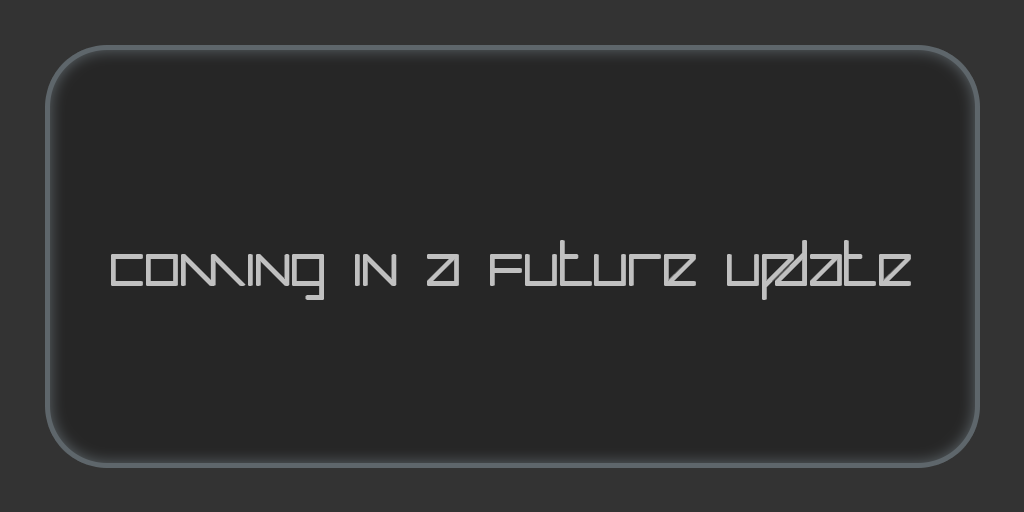
<style>
.page{position:relative;width:1024px;height:512px;background:#262626}
.page>*{position:absolute;margin:0}
.t1{font:87px "AuricomRegular";letter-spacing:0.025em;color:#c0c0c0}
</style>
<div class="page">
<p class="t1" style="left:112px;top:241px;width:798px;height:58px">Coming in a future update</p>
</div>
